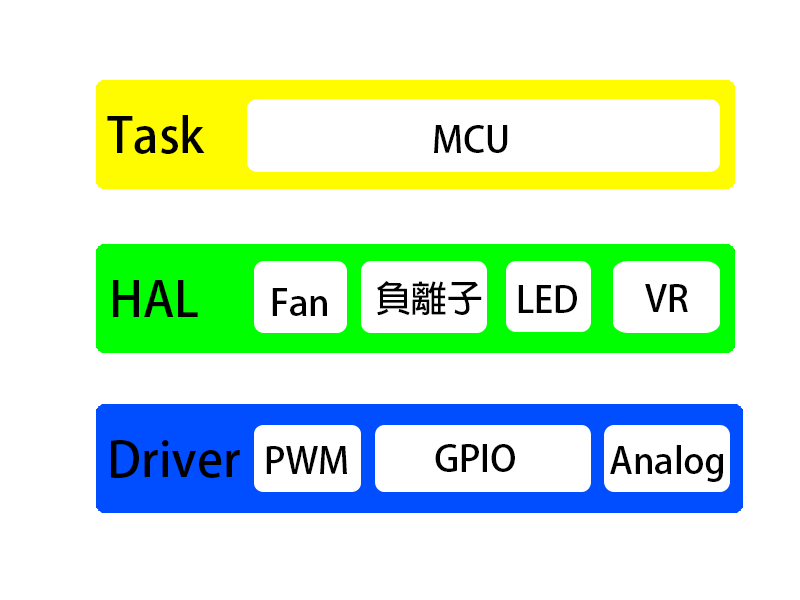
<style>
.page{position:relative;width:800px;height:600px;background:#ffffff}
.page>*{position:absolute;margin:0}
.t1{font:48px "AdobeFanHeitiStd-Bold";color:#000000}
.t2{font:36px "AdobeFanHeitiStd-Bold";color:#000000}
</style>
<div class="page">
<p class="t1" style="left:107px;top:115px;width:98px;height:39px">Task</p>
<p class="t2" style="left:434px;top:125px;width:74px;height:28px">MCU</p>
<p class="t1" style="left:113px;top:280px;width:85px;height:37px">HAL</p>
<p class="t2" style="left:377px;top:281px;width:105px;height:35px">負離子</p>
<p class="t2" style="left:272px;top:288px;width:55px;height:28px">Fan</p>
<p class="t2" style="left:518px;top:285px;width:59px;height:28px">LED</p>
<p class="t2" style="left:645px;top:284px;width:43px;height:28px">VR</p>
<p class="t1" style="left:111px;top:440px;width:129px;height:38px">Driver</p>
<p class="t2" style="left:266px;top:446px;width:81px;height:28px">PWM</p>
<p class="t2" style="left:435px;top:444px;width:80px;height:28px">GPIO</p>
<p class="t2" style="left:610px;top:445px;width:114px;height:37px">Analog</p>
</div>
